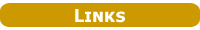
<style>
.page{position:relative;width:200px;height:30px;background:#cc9900}
.page>*{position:absolute;margin:0}
.t1{font:17.9px "TahomaSmallCap-Bold";color:#ffffff}
</style>
<div class="page">
<p class="t1" style="left:75px;top:9px;width:50px;height:14px">Links</p>
</div>
